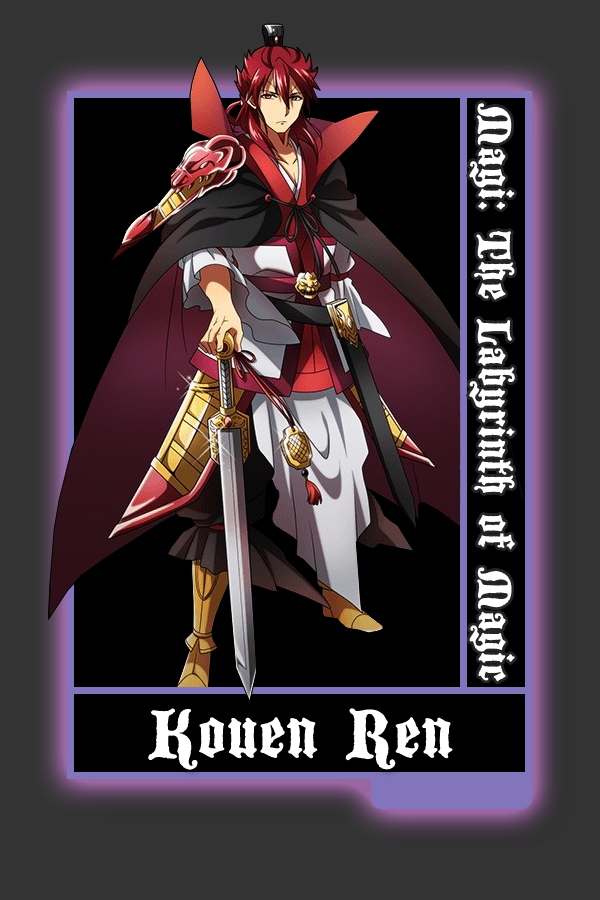
<style>
.page{position:relative;width:600px;height:900px;background:#000000}
.page>*{position:absolute;margin:0}
.t1{font:50px "BlackwoodCastle";color:#ffffff}
.t2{font:75px "BlackwoodCastle";color:#ffffff}
</style>
<div class="page">
<p class="t1" style="left:469px;top:103px;width:46px;height:579px;rotate:90deg">Magi: The Labyrinth of Magic</p>
<p class="t2" style="left:148px;top:708px;width:305px;height:62px">Kouen Ren</p>
</div>
